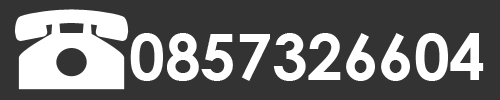
<style>
.page{position:relative;width:500px;height:100px;background:#333333}
.page>*{position:absolute;margin:0}
.t1{font:63.5px "CenturyGothic-Bold";color:#ffffff}
</style>
<div class="page">
<p class="t1" style="left:130px;top:33px;width:354px;height:48px">0857326604</p>
</div>
